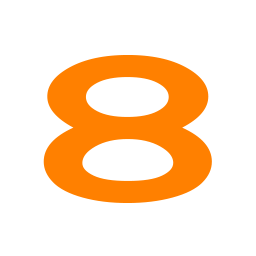
<style>
.page{position:relative;width:256px;height:256px;background:#ffffff}
.page>*{position:absolute;margin:0}
.t1{font:222.5px "CourierNewPS-BoldMT";color:#ff8000;scale:1.73 1}
</style>
<div class="page">
<p class="t1" style="left:43px;top:55px;width:169px;height:148px">8</p>
</div>
